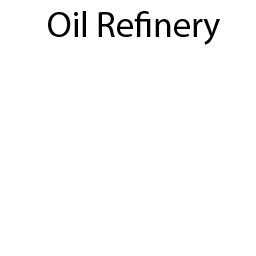
<style>
.page{position:relative;width:256px;height:256px;background:#ffffff}
.page>*{position:absolute;margin:0}
.t1{font:36px "MyriadPro-Regular";color:#000000}
</style>
<div class="page">
<p class="t1" style="left:48px;top:11px;width:172px;height:34px">Oil Refinery</p>
</div>
